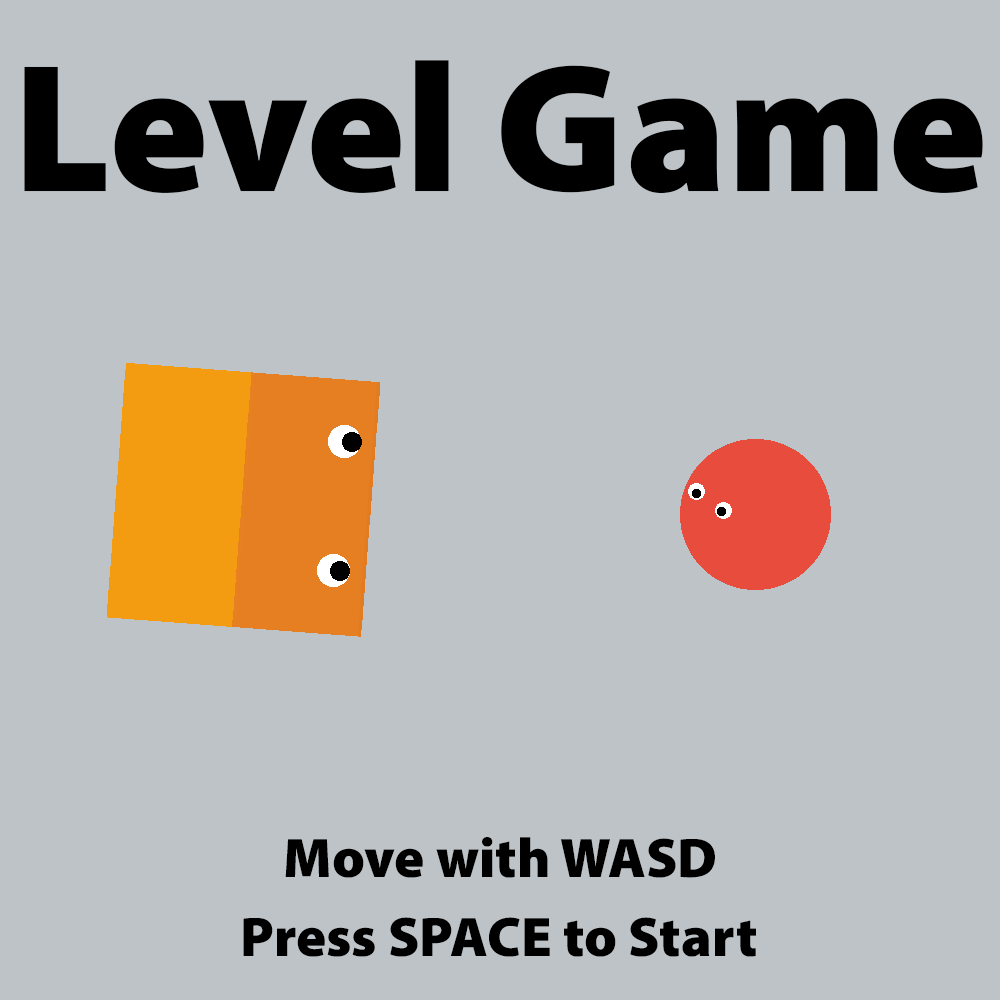
<style>
.page{position:relative;width:1000px;height:1000px;background:#bdc3c7}
.page>*{position:absolute;margin:0}
.t1{font:184px "MyriadConceptRoman-Black";color:#000000}
.t2{font:56.1px "MyriadConceptRoman-Black";color:#000000}
</style>
<div class="page">
<p class="t1" style="left:24px;top:60px;width:959px;height:134px">Level Game</p>
<p class="t2" style="left:285px;top:837px;width:430px;height:41px">Move with WASD</p>
<p class="t2" style="left:243px;top:917px;width:513px;height:40px">Press SPACE to Start</p>
</div>
